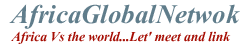
<style>
.page{position:relative;width:250px;height:50px;background:#ffffff}
.page>*{position:absolute;margin:0}
.t1{font:33.3px "Vijaya-Bold";color:#607d8b}
.t2{font:16.7px "Vijaya-Bold";color:#a60e04}
</style>
<div class="page">
<p class="t1" style="left:9px;top:4px;width:231px;height:25px">AfricaGlobalNetwok</p>
<p class="t2" style="left:11px;top:31px;width:220px;height:13px">Africa Vs the world...Let' meet and link</p>
</div>
